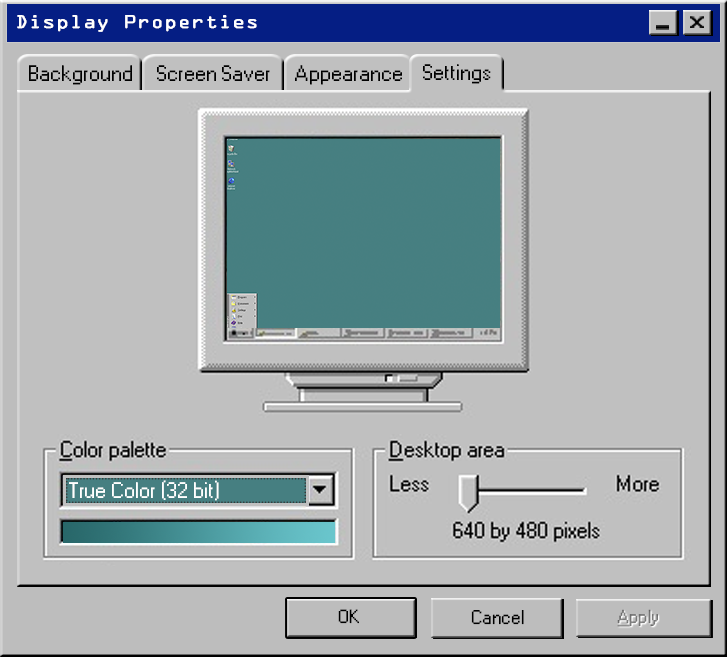
<style>
.page{position:relative;width:727px;height:657px;background:#c0c0c0}
.page>*{position:absolute;margin:0}
.t1{font:16.7px "OCRAStd";color:#ffffff;font-weight:bold;scale:1.08 1}
.t2{font:22px "W95FARegular";color:#000000}
.t3{font:22px "W95FARegular";color:#ffffff}
.t4{font:18.6px "W95FARegular";color:#000000}
.t5{font:19.3px "W95FARegular";color:#000000}
.t6{font:18.3px "W95FARegular";color:#787878}
.t7{font:18.3px "W95FARegular";color:#787878;text-decoration:underline}
</style>
<div class="page">
<p class="t1" style="left:17px;top:15px;width:240px;height:17px">Display Properties</p>
<p class="t2" style="left:29px;top:65px;width:103px;height:20px">Background</p>
<p class="t2" style="left:157px;top:65px;width:113px;height:16px">Screen Saver</p>
<p class="t2" style="left:295px;top:65px;width:107px;height:20px">Appearance</p>
<p class="t2" style="left:423px;top:64px;width:68px;height:20px">Settings</p>
<p class="t3" style="left:69px;top:480px;width:150px;height:21px">True Color (32 bit)</p>
<p class="t4" style="left:338px;top:609px;width:21px;height:15px">OK</p>
<p class="t5" style="left:471px;top:610px;width:53px;height:15px">Cancel</p>
<p class="t6" style="left:617px;top:609px;width:41px;height:18px"><span class="t7">A</span>pply</p>
</div>
